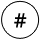
<style>
.page{position:relative;width:40px;height:40px;background:#ffffff}
.page>*{position:absolute;margin:0}
.t1{font:20px "OpenSans-Semibold";color:#000000}
</style>
<div class="page">
<p class="t1" style="left:14px;top:13px;width:13px;height:15px">#</p>
</div>
